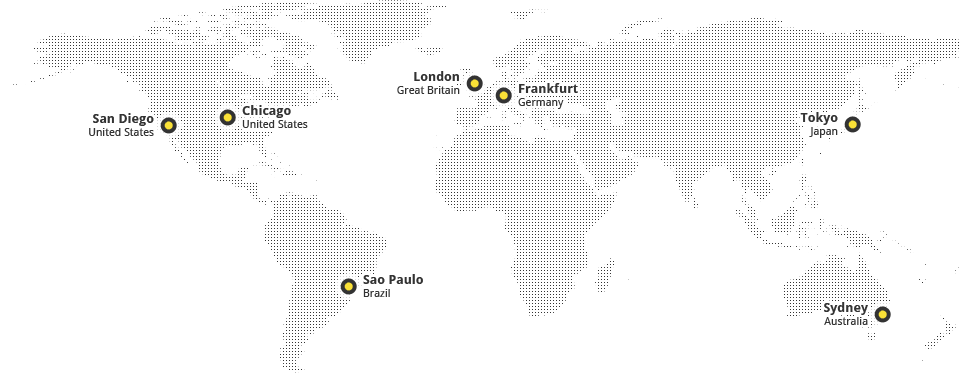
<style>
.page{position:relative;width:960px;height:373px;background:#ffffff}
.page>*{position:absolute;margin:0}
.t1{font:11px "DroidSans";color:#333333}
.t2{font:13px "DroidSans-Bold";color:#333333}
</style>
<div class="page">
<p class="t1" style="left:397px;top:71px;width:63px;height:23px;text-align:right"><span class="t2">London<br></span>Great Britain</p>
<p class="t2" style="left:518px;top:83px;width:60px;height:26px">Frankfurt<br><span class="t1">Germany</span></p>
<p class="t1" style="left:89px;top:113px;width:65px;height:23px;text-align:right"><span class="t2">San Diego<br></span>United States</p>
<p class="t1" style="left:242px;top:105px;width:66px;height:23px"><span class="t2">Chicago<br></span>United States</p>
<p class="t2" style="left:800px;top:112px;width:38px;height:26px;text-align:right">Tokyo<br><span class="t1">Japan</span></p>
<p class="t2" style="left:363px;top:274px;width:60px;height:23px">Sao Paulo<br><span class="t1">Brazil</span></p>
<p class="t1" style="left:824px;top:302px;width:44px;height:23px;text-align:right"><span class="t2">Sydney<br></span>Australia</p>
</div>
